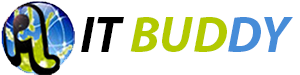
<style>
.page{position:relative;width:300px;height:75px;background:#ffffff}
.page>*{position:absolute;margin:0}
.t1{font:51px "MyriadPro-BoldIt";color:#b2c900}
.t2{font:51px "MyriadPro-BoldIt";color:#000000}
.t3{font:51px "MyriadPro-BoldIt";color:#468cd8}
</style>
<div class="page">
<p class="t1" style="left:81px;top:17px;width:212px;height:35px"><span class="t2">IT </span>BUD<span class="t3">DY</span></p>
</div>
